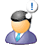
<style>
.page{position:relative;width:45px;height:46px;background:#ffffff}
.page>*{position:absolute;margin:0}
.t1{font:10px "Tahoma-Bold";letter-spacing:0.03em;color:#558ec8}
</style>
<div class="page">
<p class="t1" style="left:31px;top:2px;width:2px;height:8px">!</p>
</div>
